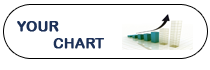
<style>
.page{position:relative;width:210px;height:70px;background:#ffffff}
.page>*{position:absolute;margin:0}
.t1{font:14px "ArialRoundedMTBold";color:#1d3158;font-weight:bold}
</style>
<div class="page">
<p class="t1" style="left:17px;top:21px;width:87px;height:28px">YOUR<br> CHART</p>
</div>
